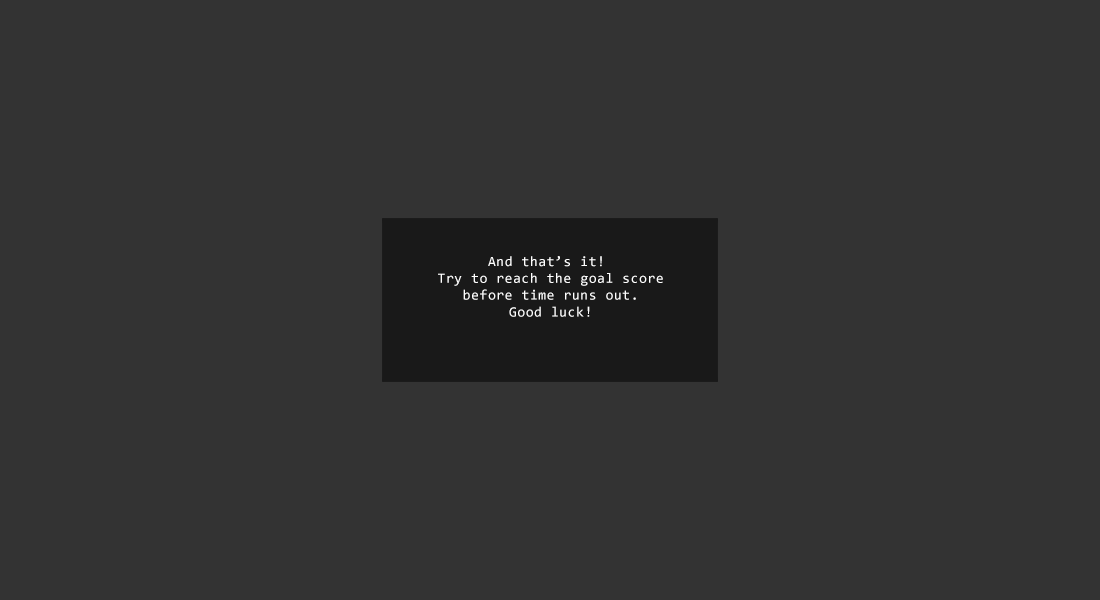
<style>
.page{position:relative;width:1100px;height:600px;background:#333333}
.page>*{position:absolute;margin:0}
.t1{font:14px "Consolas";letter-spacing:0.05em;color:#ffffff}
</style>
<div class="page">
<p class="t1" style="left:438px;top:256px;width:225px;height:61px;text-align:center">And that’s it! <br>Try to reach the goal score<br>before time runs out.<br>Good luck!</p>
</div>
